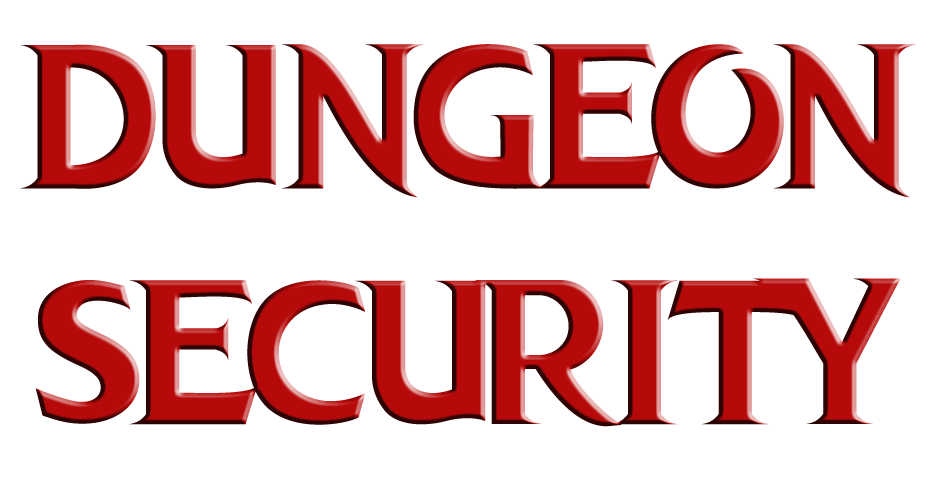
<style>
.page{position:relative;width:946px;height:479px;background:#ffffff}
.page>*{position:absolute;margin:0}
.t1{font:196.6px "DRAGONHUNTER";color:#b60a0a}
</style>
<div class="page">
<p class="t1" style="left:20px;top:44px;width:896px;height:383px;text-align:center">Dungeon Security</p>
</div>
